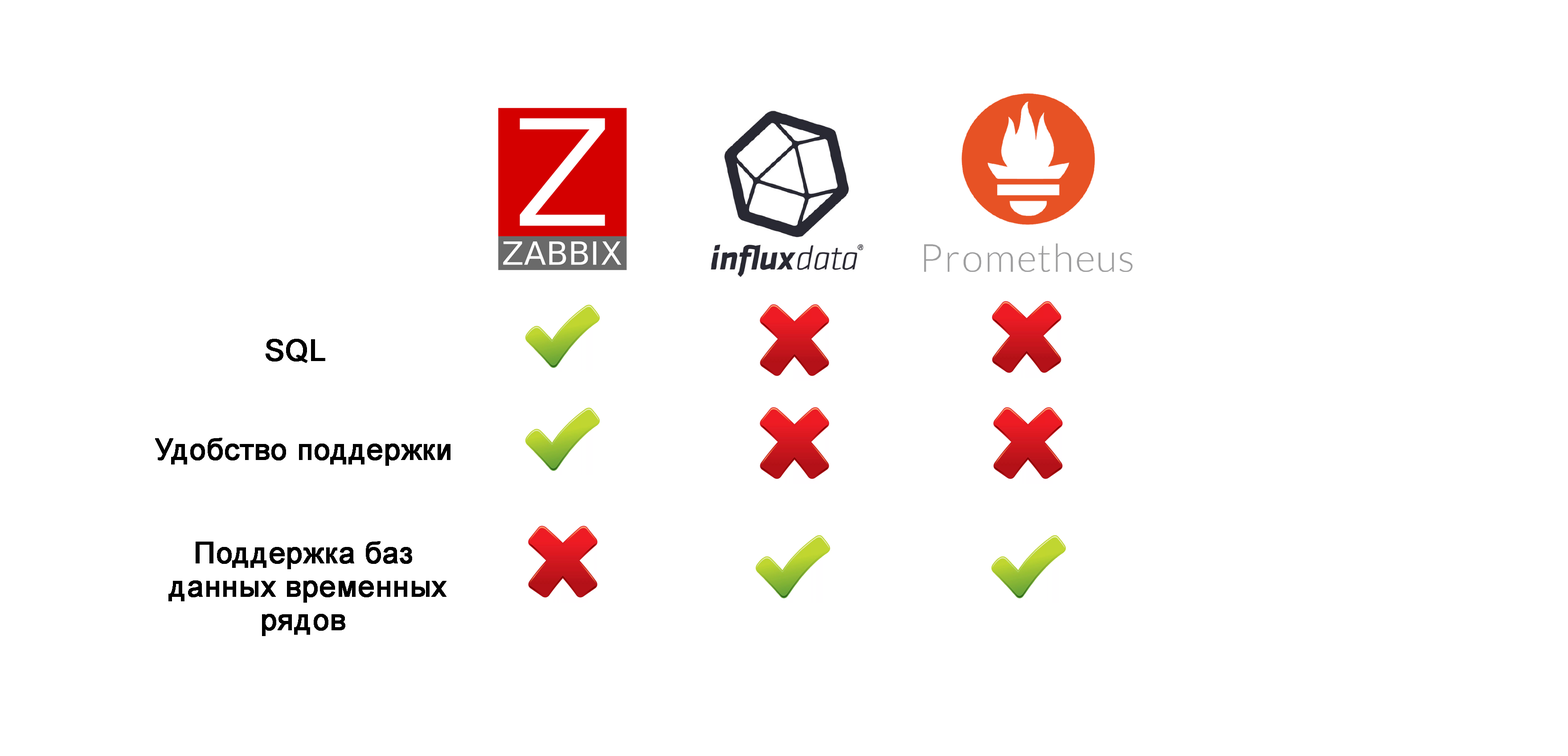
<style>
.page{position:relative;width:1568px;height:756px;background:#ffffff}
.page>*{position:absolute;margin:0}
.t1{font:29.7px "ArialMT";color:#000000;font-weight:bold}
.t2{font:29.7px/11.1px "ArialMT";color:#000000;font-weight:bold}
</style>
<div class="page">
<p class="t1" style="left:266px;top:339px;width:59px;height:24px">SQL</p>
<p class="t1" style="left:155px;top:438px;width:295px;height:28px">Удобство поддержки</p>
<p class="t2" style="left:168px;top:541px;width:278px;height:95px;text-align:center">Поддержка баз<br><br><br> данных временных <br><br><br>рядов</p>
</div>
